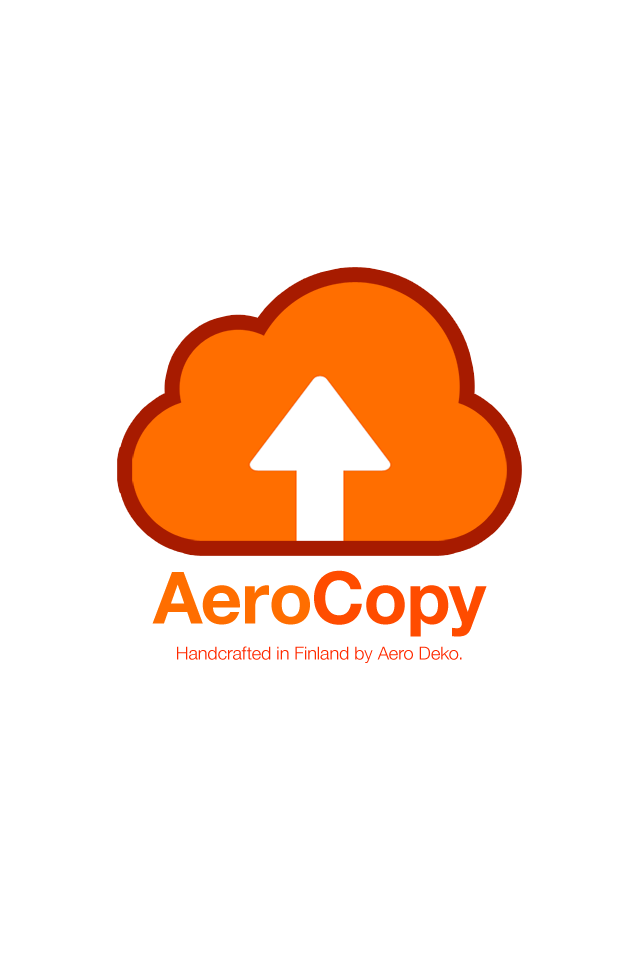
<style>
.page{position:relative;width:640px;height:960px;background:#ffffff}
.page>*{position:absolute;margin:0}
.t1{font:18px/36px "HelveticaNeue-Light";color:#ff2a00}
.t2{font:72px "HelveticaNeue-Bold";color:#ff6e00}
.t3{font:72px "HelveticaNeue-Bold";color:#ff4c00}
</style>
<div class="page">
<p class="t1" style="left:152px;top:570px;width:335px;height:93px;text-align:center"><span class="t2">Aero</span><span class="t3">Copy<br></span>Handcrafted in Finland by Aero Deko.</p>
</div>
